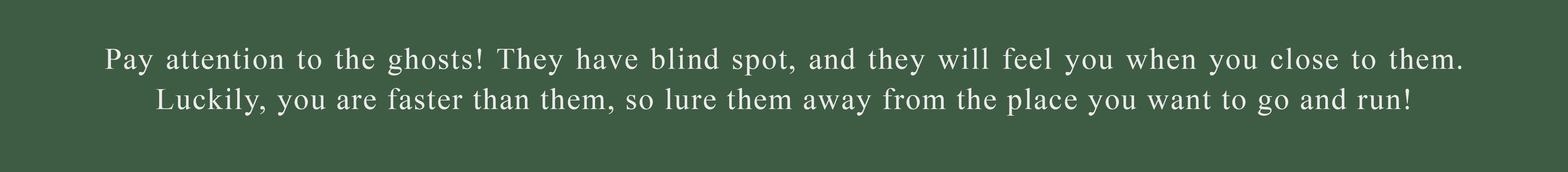
<style>
.page{position:relative;width:1568px;height:172px;background:#3e5c43}
.page>*{position:absolute;margin:0}
.t1{font:30.4px/40.5px "TimesNewRomanPSMT";letter-spacing:0.05em;color:#ebebeb}
</style>
<div class="page">
<p class="t1" style="left:105px;top:48px;width:1356px;height:68px;text-align:justify">Pay attention to the ghosts! They have blind spot, and they will feel you when you close to them. Luckily, you are faster than them, so lure them away from the place you want to go and run!</p>
</div>
